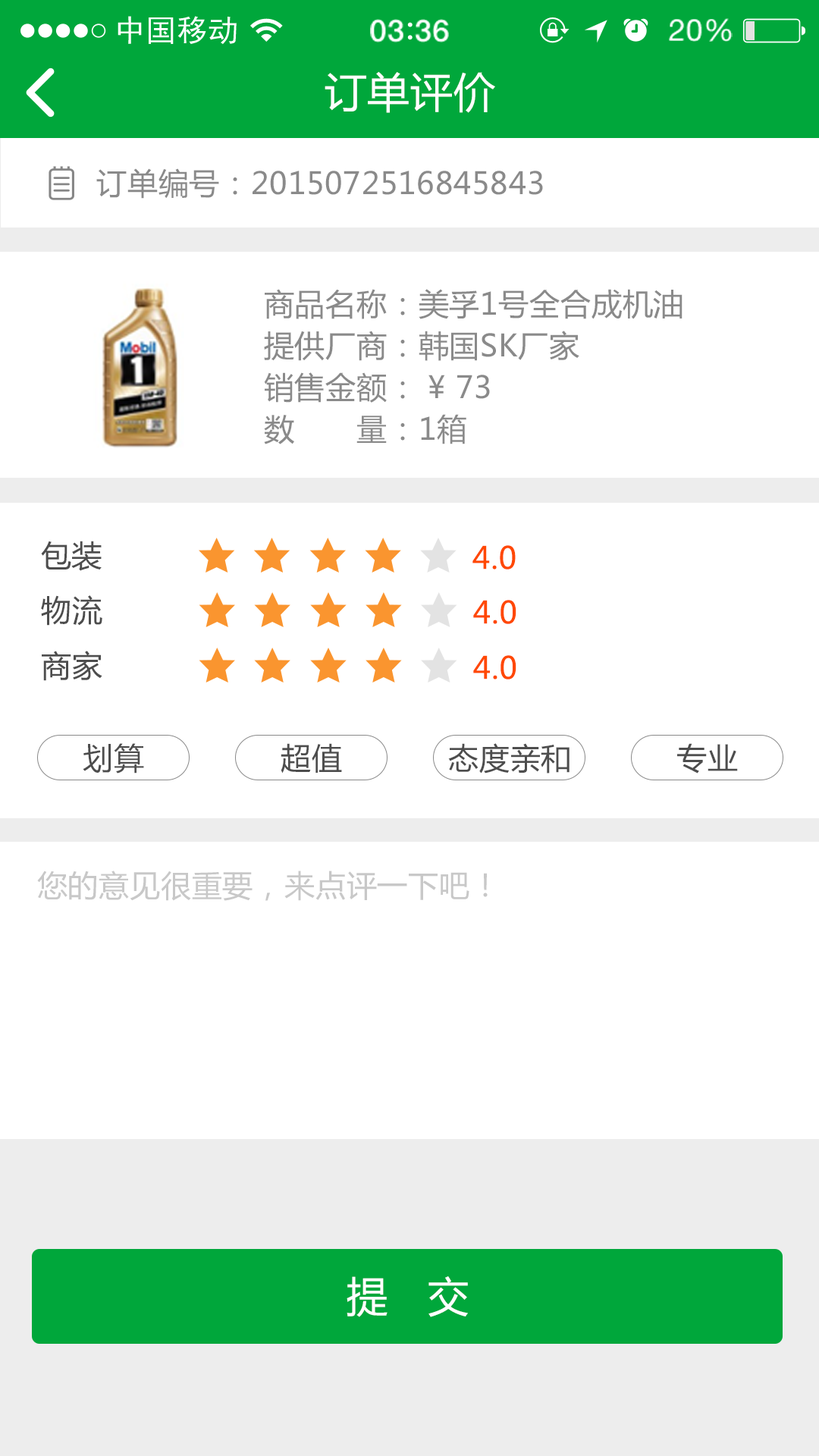
<style>
.page{position:relative;width:819px;height:1456px;background:#ffffff}
.page>*{position:absolute;margin:0}
.t1{font:41.7px "MicrosoftYaHei";letter-spacing:0.02em;color:#ffffff}
.t2{font:30.3px "MicrosoftYaHei";letter-spacing:0.02em;color:#8a8a8a}
.t3{font:30.3px/41.7px "MicrosoftYaHei";letter-spacing:0.02em;color:#8a8a8a}
.t4{font:30.3px/41.7px "MicrosoftYaHei";letter-spacing:0.04em;color:#8a8a8a}
.t5{font:30.3px "MicrosoftYaHei";letter-spacing:0.02em;color:#4d4d4d}
.t6{font:30.3px "MicrosoftYaHei";letter-spacing:0.02em;color:#ff4800}
.t7{font:30.3px "MicrosoftYaHei";letter-spacing:0.02em;color:#c8c8c8}
</style>
<div class="page">
<p class="t1" style="left:325px;top:71px;width:170px;height:42px">订单评价</p>
<p class="t2" style="left:96px;top:168px;width:447px;height:31px">订单编号：2015072516845843</p>
<p class="t3" style="left:264px;top:289px;width:418px;height:155px">商品名称：美孚1号全合成机油<br>提供厂商：韩国SK厂家<br>销售金额： ¥ 73<br><span class="t4">数      量</span>：1箱</p>
<p class="t5" style="left:41px;top:541px;width:61px;height:30px">包装</p>
<p class="t6" style="left:472px;top:545px;width:44px;height:25px">4.0</p>
<p class="t5" style="left:41px;top:595px;width:61px;height:31px">物流</p>
<p class="t6" style="left:473px;top:600px;width:43px;height:24px">4.0</p>
<p class="t5" style="left:42px;top:651px;width:60px;height:30px">商家</p>
<p class="t6" style="left:473px;top:655px;width:43px;height:24px">4.0</p>
<p class="t5" style="left:83px;top:743px;width:61px;height:30px">划算</p>
<p class="t5" style="left:281px;top:743px;width:61px;height:30px">超值</p>
<p class="t5" style="left:448px;top:743px;width:122px;height:30px">态度亲和</p>
<p class="t5" style="left:677px;top:743px;width:61px;height:30px">专业</p>
<p class="t7" style="left:37px;top:871px;width:451px;height:30px">您的意见很重要，来点评一下吧！</p>
<p class="t1" style="left:347px;top:1276px;width:121px;height:41px">提   交</p>
</div>
